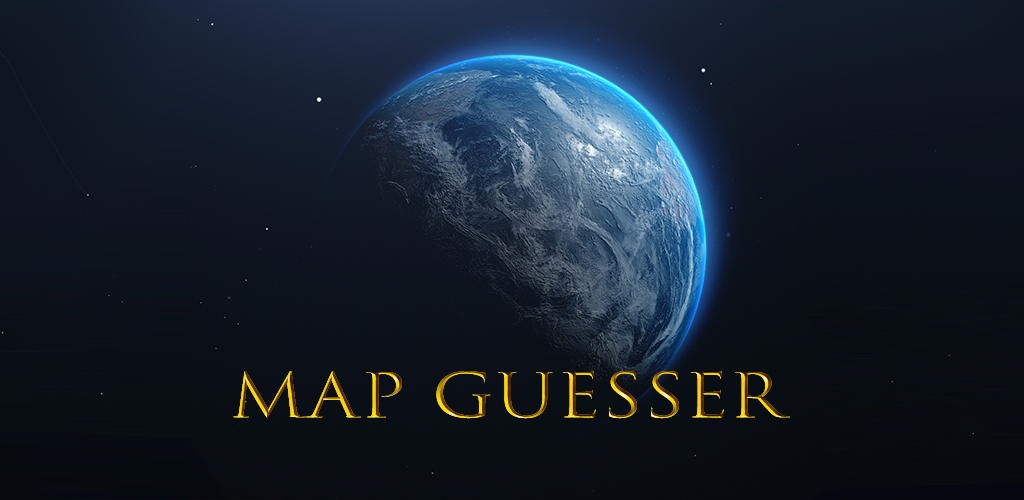
<style>
.page{position:relative;width:1024px;height:500px}
.page>*{position:absolute;margin:0}
.t1{font:59.8px "TrajanColor-Concept";letter-spacing:0.02em;scale:1.2 1}
</style>
<div class="page">
<p class="t1" style="left:233px;top:371px;width:557px;height:48px">Map Guesser</p>
</div>
